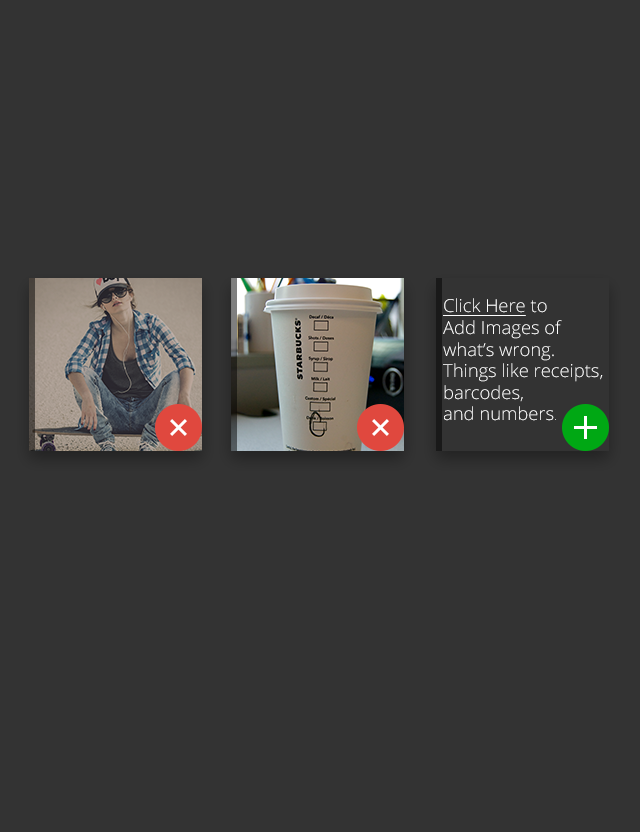
<style>
.page{position:relative;width:640px;height:832px;background:#333333}
.page>*{position:absolute;margin:0}
.t1{font:18px "OpenSans-Light";color:#ffffff}
.t2{font:18px "OpenSans-Light";color:#ffffff;text-decoration:underline}
.t3{font:11px "OpenSans-Light";color:#ffffff}
</style>
<div class="page">
<p class="t1" style="left:443px;top:298px;width:160px;height:123px"><span class="t2">Click Here</span> to <br>Add Images of <br>what’s wrong. <br>Things like receipts,<br>barcodes,<br>and numbers<span class="t3">.</span></p>
</div>
